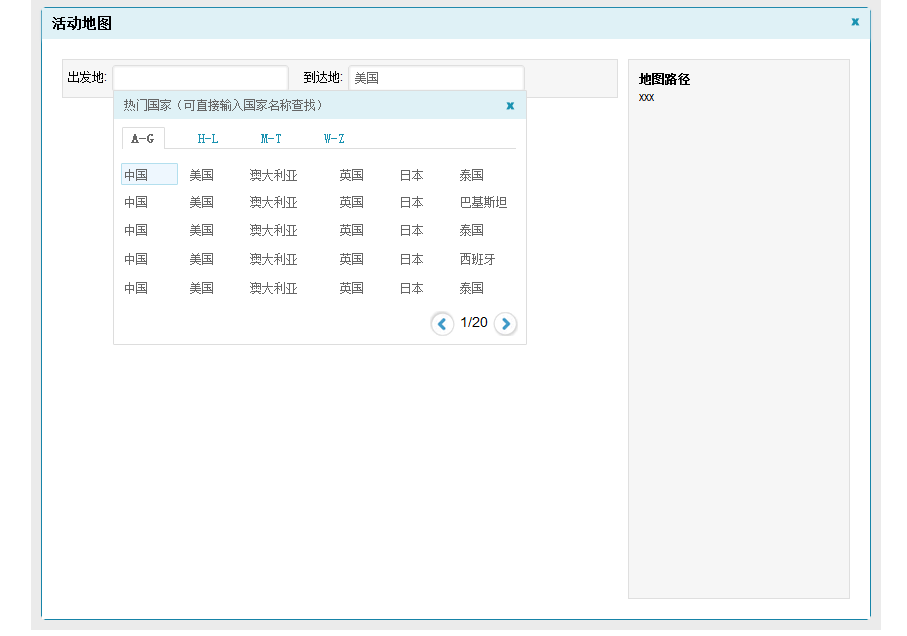
<style>
.page{position:relative;width:907px;height:636px;background:#ffffff}
.page>*{position:absolute;margin:0}
.t1{font:12px "SimSun";color:#666666}
.t2{font:13.3px "SimSun";color:#1992b1}
.t3{font:13.3px "SimSun";color:#666666;font-weight:bold}
</style>
<div class="page">
<p class="t1" style="left:124px;top:99px;width:197px;height:12px">热门国家（可直接输入国家名称查找）</p>
<p class="t2" style="left:131px;top:134px;width:213px;height:9px"><span class="t3"> A-G </span>     H-L      M-T      W-Z</p>
<p class="t1" style="left:125px;top:169px;width:358px;height:12px">中国       美国      澳大利亚       英国      日本      泰国</p>
<p class="t1" style="left:125px;top:196px;width:382px;height:12px">中国       美国      澳大利亚       英国      日本      巴基斯坦</p>
<p class="t1" style="left:125px;top:224px;width:358px;height:12px">中国       美国      澳大利亚       英国      日本      泰国</p>
<p class="t1" style="left:125px;top:253px;width:370px;height:12px">中国       美国      澳大利亚       英国      日本      西班牙</p>
<p class="t1" style="left:125px;top:282px;width:358px;height:12px">中国       美国      澳大利亚       英国      日本      泰国</p>
</div>
